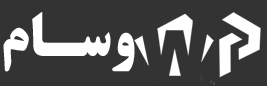
<style>
.page{position:relative;width:267px;height:86px;background:#333333}
.page>*{position:absolute;margin:0}
.t1{font:60px "BTitrBold";color:#ffffff;scale:0.95 1}
</style>
<div class="page">
<p class="t1" style="left:3px;top:12px;width:132px;height:60px">وسـام</p>
</div>
